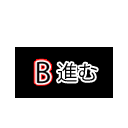
<style>
.page{position:relative;width:128px;height:128px;background:#ffffff}
.page>*{position:absolute;margin:0}
.t1{font:20.2px "KozGoPr6N-Regular";color:#000000}
</style>
<div class="page">
<p class="t1" style="left:58px;top:62px;width:39px;height:20px">進む</p>
</div>
